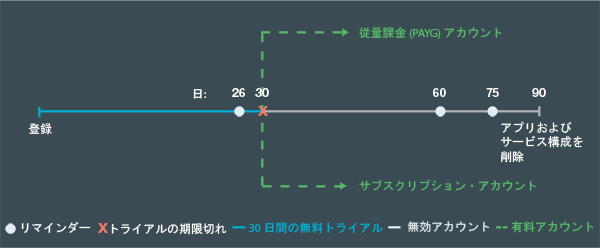
<style>
.page{position:relative;width:600px;height:248px;background:#3b4b54}
.page>*{position:absolute;margin:0}
.t1{font:11.9px "MyriadPro-Regular";color:#56bb66}
.t2{font:11.9px "MS-Gothic";color:#56bb66}
.t3{font:11.9px "MS-Gothic";color:#ffffff}
.t4{font:11.9px "MyriadPro-Regular";color:#ffffff}
.t5{font:11.9px "HelvNeueBoldforIBM";color:#ffffff}
.t6{font:12.7px "HelvNeueBoldforIBM";color:#f47d64;scale:1.17 1}
.t7{font:12px "MS-Gothic";color:#00aed1}
.t8{font:12px "MyriadPro-Regular";color:#00aed1}
.t9{font:11.9px "MS-Gothic";color:#dfe6eb}
.t10{font:12px "MS-Gothic";color:#56bb66}
</style>
<div class="page">
<p class="t1" style="left:359px;top:27px;width:143px;height:12px"><span class="t2">従量課金</span> (PAYG) <span class="t2">アカウント</span></p>
<p class="t3" style="left:193px;top:89px;width:13px;height:10px">日<span class="t4">:</span></p>
<p class="t5" style="left:232px;top:88px;width:13px;height:9px">26</p>
<p class="t5" style="left:255px;top:88px;width:14px;height:9px">30</p>
<p class="t5" style="left:433px;top:88px;width:13px;height:9px">60</p>
<p class="t5" style="left:486px;top:88px;width:13px;height:9px">75</p>
<p class="t5" style="left:532px;top:88px;width:14px;height:9px">90</p>
<p class="t6" style="left:258px;top:106px;width:10px;height:10px">X</p>
<p class="t3" style="left:28px;top:123px;width:24px;height:12px">登録</p>
<p class="t3" style="left:500px;top:121px;width:83px;height:42px">アプリおよび<br>サービス構成を<br>削除</p>
<p class="t2" style="left:359px;top:179px;width:177px;height:12px">サブスクリプション・アカウントAccount</p>
<p class="t3" style="left:21px;top:221px;width:70px;height:12px">リマインダー</p>
<p class="t7" style="left:249px;top:222px;width:134px;height:12px"><span class="t8">30 </span>日間の無料トライアル</p>
<p class="t9" style="left:407px;top:221px;width:83px;height:12px">無効アカウント</p>
<p class="t10" style="left:511px;top:221px;width:83px;height:12px">有料アカウント</p>
<p class="t6" style="left:98px;top:223px;width:10px;height:10px">X</p>
<p class="t3" style="left:111px;top:223px;width:116px;height:12px">トライアルの期限切れ</p>
</div>
